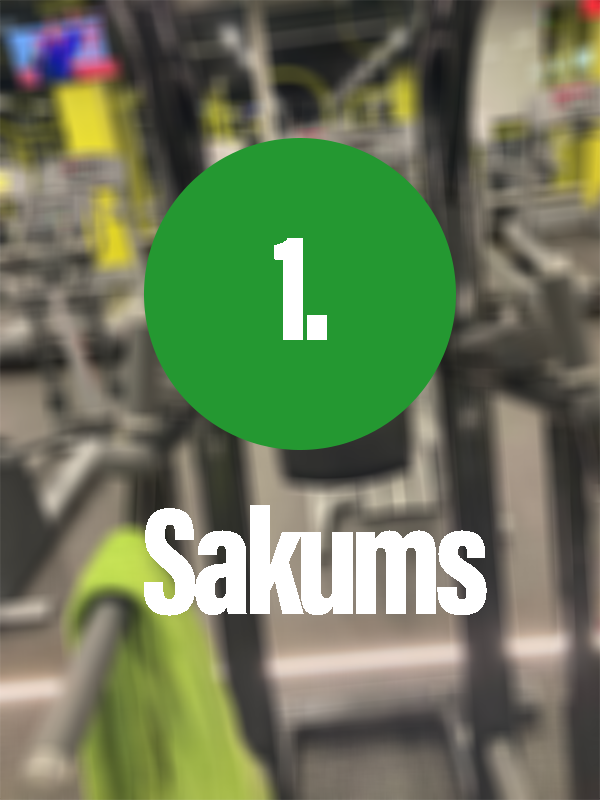
<style>
.page{position:relative;width:600px;height:800px}
.page>*{position:absolute;margin:0}
.t1{font:156.2px "AcuminConcept-ExtraCondensedBlack";letter-spacing:-0.05em;color:#ffffff}
</style>
<div class="page">
<p class="t1" style="left:274px;top:238px;width:53px;height:102px">1.</p>
<p class="t1" style="left:144px;top:505px;width:343px;height:111px">Sakums</p>
</div>
